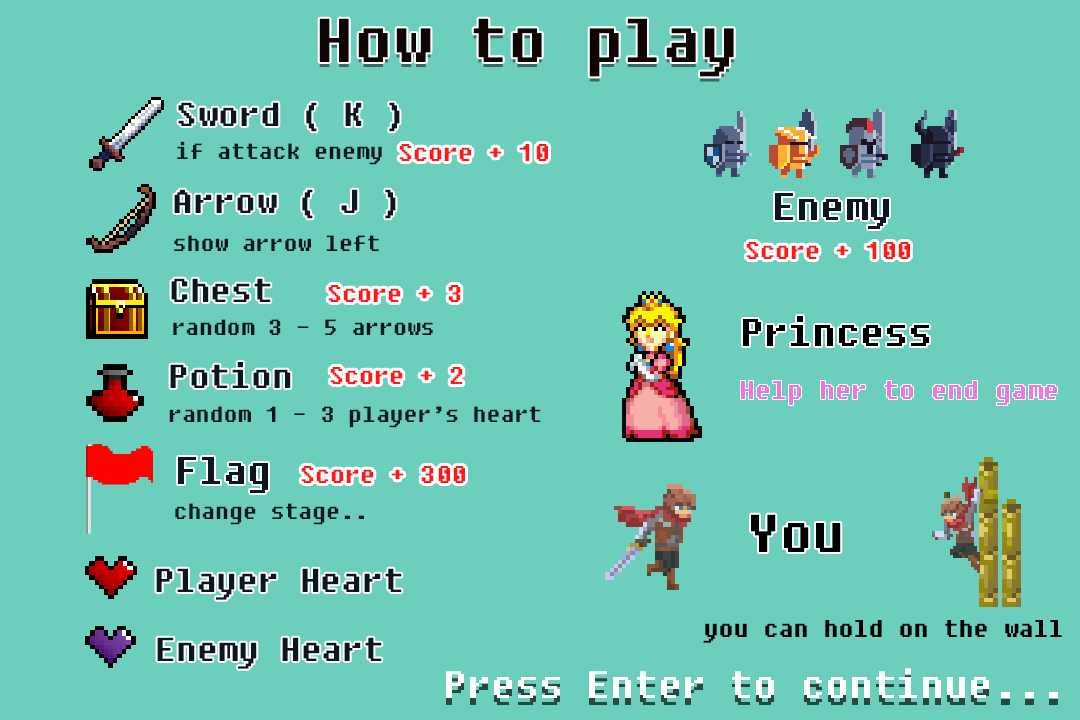
<style>
.page{position:relative;width:1080px;height:720px;background:#6ccebd}
.page>*{position:absolute;margin:0}
.t1{font:77px "FixedsysExcelsiorIIIb";color:#100505}
.t2{font:41.5px "FixedsysExcelsiorIIIb";color:#0b1620}
.t3{font:27.7px "FixedsysExcelsiorIIIb";color:#0b1620}
.t4{font:30px "FixedsysExcelsiorIIIb";color:#ff1919}
.t5{font:48px "FixedsysExcelsiorIIIb";color:#0b1620}
.t6{font:48px "FixedsysExcelsiorIIIb";color:#000000}
.t7{font:32px "FixedsysExcelsiorIIIb";color:#ed74e9}
.t8{font:66.1px "FixedsysExcelsiorIIIb";color:#000000}
.t9{font:30px "FixedsysExcelsiorIIIb";color:#000000}
.t10{font:47.7px "FixedsysExcelsiorIIIb";color:#ffffff}
</style>
<div class="page">
<p class="t1" style="left:319px;top:18px;width:415px;height:59px">How to play</p>
<p class="t2" style="left:178px;top:102px;width:222px;height:30px">Sword ( K )</p>
<p class="t3" style="left:177px;top:141px;width:205px;height:24px">if attack enemy</p>
<p class="t4" style="left:399px;top:144px;width:149px;height:17px">Score + 10</p>
<p class="t2" style="left:174px;top:189px;width:222px;height:30px">Arrow ( J )</p>
<p class="t5" style="left:775px;top:193px;width:114px;height:36px">Enemy</p>
<p class="t3" style="left:174px;top:235px;width:205px;height:16px">show arrow left</p>
<p class="t4" style="left:746px;top:242px;width:164px;height:17px">Score + 100</p>
<p class="t2" style="left:171px;top:278px;width:100px;height:24px">Chest</p>
<p class="t4" style="left:328px;top:285px;width:133px;height:17px">Score + 3</p>
<p class="t6" style="left:743px;top:316px;width:186px;height:30px">Princess</p>
<p class="t3" style="left:173px;top:319px;width:260px;height:16px">random 3 - 5 arrows</p>
<p class="t2" style="left:170px;top:362px;width:121px;height:26px">Potion</p>
<p class="t4" style="left:330px;top:367px;width:133px;height:17px">Score + 2</p>
<p class="t7" style="left:741px;top:381px;width:316px;height:24px">Help her to end game</p>
<p class="t3" style="left:169px;top:406px;width:372px;height:22px">random 1 - 3 player’s heart</p>
<p class="t5" style="left:178px;top:457px;width:90px;height:36px">Flag</p>
<p class="t4" style="left:301px;top:466px;width:164px;height:17px">Score + 300</p>
<p class="t3" style="left:175px;top:503px;width:189px;height:22px">change stage..</p>
<p class="t8" style="left:751px;top:514px;width:90px;height:38px">You</p>
<p class="t2" style="left:156px;top:568px;width:246px;height:32px">Player Heart</p>
<p class="t9" style="left:703px;top:620px;width:359px;height:23px">you can hold on the wall</p>
<p class="t2" style="left:157px;top:637px;width:225px;height:32px">Enemy Heart</p>
<p class="t10" style="left:446px;top:668px;width:612px;height:30px">Press Enter to continue...</p>
</div>
